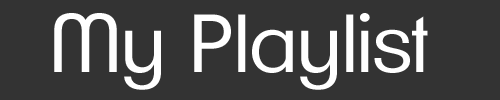
<style>
.page{position:relative;width:500px;height:100px;background:#333333}
.page>*{position:absolute;margin:0}
.t1{font:80px "ClementePDag-Book";color:#ffffff}
</style>
<div class="page">
<p class="t1" style="left:54px;top:13px;width:374px;height:77px">My Playlist</p>
</div>
